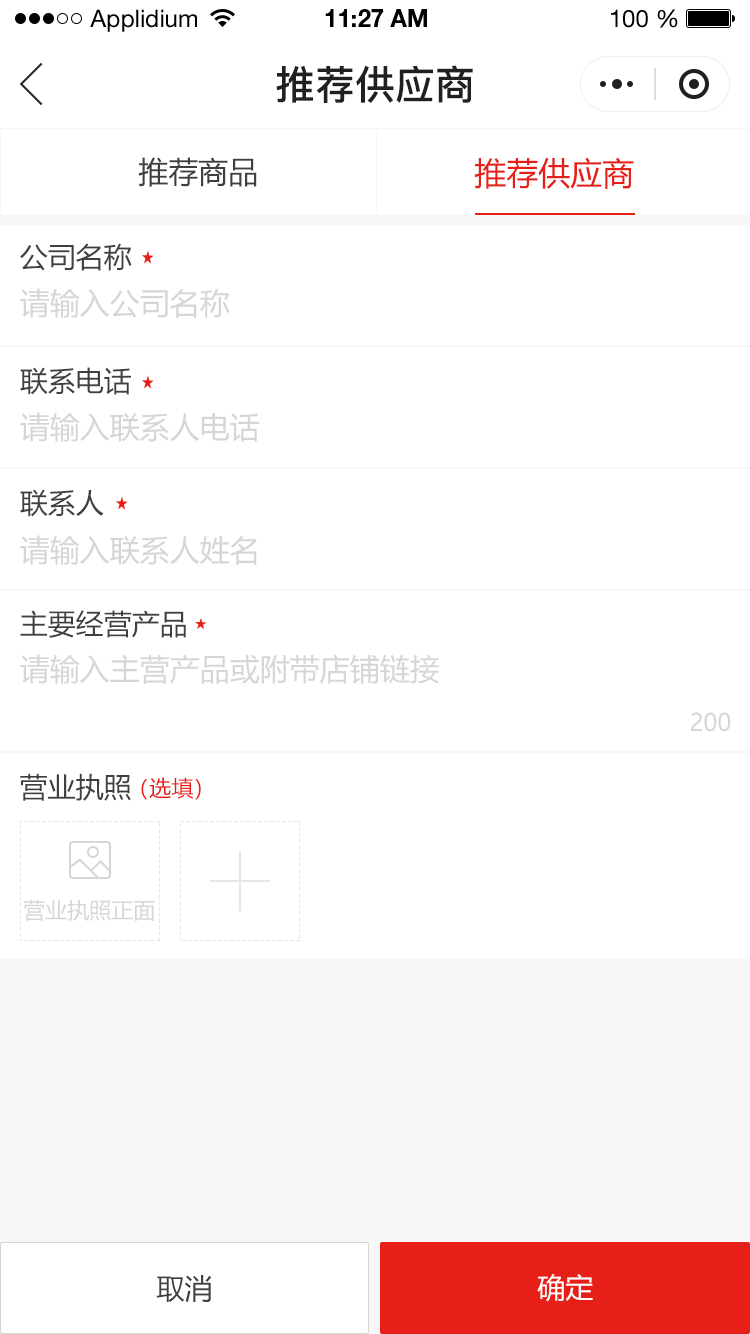
<style>
.page{position:relative;width:750px;height:1334px;background:#ffffff}
.page>*{position:absolute;margin:0}
.t1{font:24px "HelveticaNeueLTStd-Roman";color:#000000}
.t2{font:24px "HelveticaNeueLTStd-Bd";color:#000000}
.t3{font:40px "PingFang-SC-Bold";color:#202020;text-transform:uppercase}
.t4{font:30px "MicrosoftYaHei";color:#404040;text-transform:uppercase}
.t5{font:32px "MicrosoftYaHei";color:#e61f18;text-transform:uppercase}
.t6{font:28px "MicrosoftYaHei";color:#404040;text-transform:uppercase}
.t7{font:30px "MicrosoftYaHei";color:#d6d6d6;text-transform:uppercase}
.t8{font:24px "MicrosoftYaHei";color:#d6d6d6;text-transform:uppercase}
.t9{font:22px "MicrosoftYaHei";color:#e61f18;text-transform:uppercase}
.t10{font:22px "MicrosoftYaHei";color:#d6d6d6;text-transform:uppercase}
.t11{font:28px "MicrosoftYaHei";color:#ffffff;text-transform:uppercase}
</style>
<div class="page">
<p class="t1" style="left:90px;top:9px;width:107px;height:23px">Applidium</p>
<p class="t2" style="left:325px;top:9px;width:102px;height:18px">11:27 AM</p>
<p class="t1" style="left:611px;top:9px;width:67px;height:19px">100 %</p>
<p class="t3" style="left:276px;top:65px;width:197px;height:38px">推荐供应商</p>
<p class="t4" style="left:138px;top:157px;width:119px;height:30px">推荐商品</p>
<p class="t5" style="left:474px;top:157px;width:160px;height:32px">推荐供应商</p>
<p class="t6" style="left:20px;top:243px;width:112px;height:28px">公司名称</p>
<p class="t7" style="left:20px;top:288px;width:210px;height:30px">请输入公司名称</p>
<p class="t6" style="left:20px;top:367px;width:111px;height:28px">联系电话</p>
<p class="t7" style="left:20px;top:412px;width:240px;height:30px">请输入联系人电话</p>
<p class="t6" style="left:20px;top:489px;width:84px;height:28px">联系人</p>
<p class="t7" style="left:20px;top:535px;width:237px;height:30px">请输入联系人姓名</p>
<p class="t6" style="left:20px;top:610px;width:166px;height:28px">主要经营产品</p>
<p class="t7" style="left:20px;top:654px;width:419px;height:30px">请输入主营产品或附带店铺链接</p>
<p class="t8" style="left:691px;top:712px;width:40px;height:20px">200</p>
<p class="t6" style="left:20px;top:773px;width:111px;height:28px">营业执照</p>
<p class="t9" style="left:141px;top:777px;width:60px;height:23px">（选填）</p>
<p class="t10" style="left:23px;top:899px;width:132px;height:22px">营业执照正面</p>
<p class="t6" style="left:156px;top:1275px;width:56px;height:27px">取消</p>
<p class="t11" style="left:537px;top:1274px;width:56px;height:28px">确定</p>
</div>
